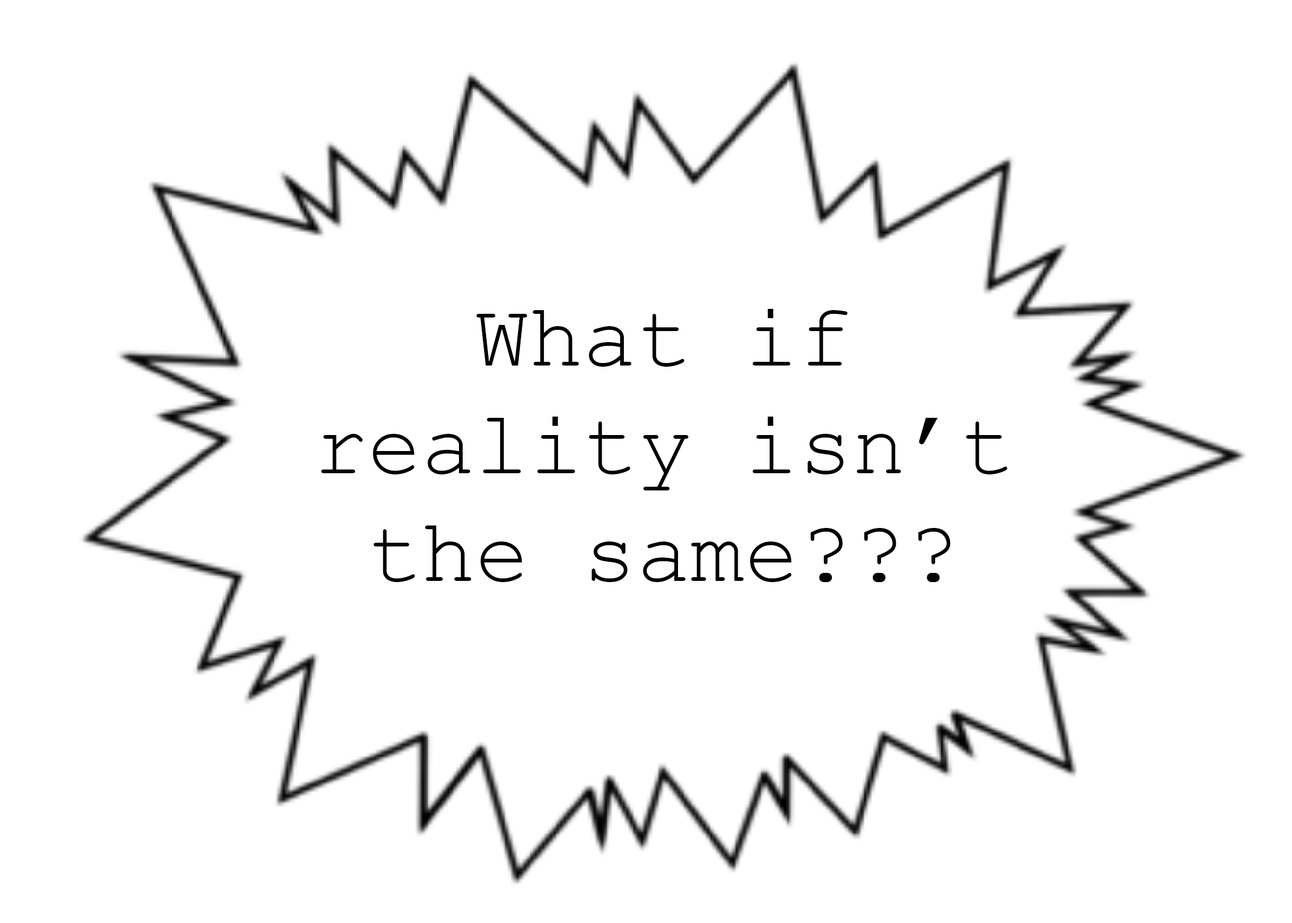
<style>
.page{position:relative;width:1292px;height:923px;background:#ffffff}
.page>*{position:absolute;margin:0}
.t1{font:89.7px "CourierNewPSMT";color:#000000}
</style>
<div class="page">
<p class="t1" style="left:321px;top:309px;width:687px;height:273px;text-align:center">What if reality isn’t the same???</p>
</div>
